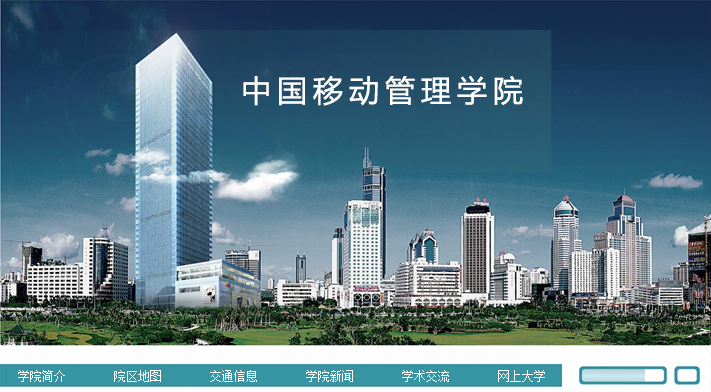
<style>
.page{position:relative;width:711px;height:392px}
.page>*{position:absolute;margin:0}
.t1{font:30px "MicrosoftYaHei";letter-spacing:0.2em;color:#ffffff}
.t2{font:12px "SimSun";color:#ffffff}
</style>
<div class="page">
<p class="t1" style="left:243px;top:75px;width:280px;height:31px">中国移动管理学院</p>
<p class="t2" style="left:18px;top:370px;width:527px;height:12px">学院简介        院区地图        交通信息        学院新闻        学术交流        网上大学</p>
</div>
